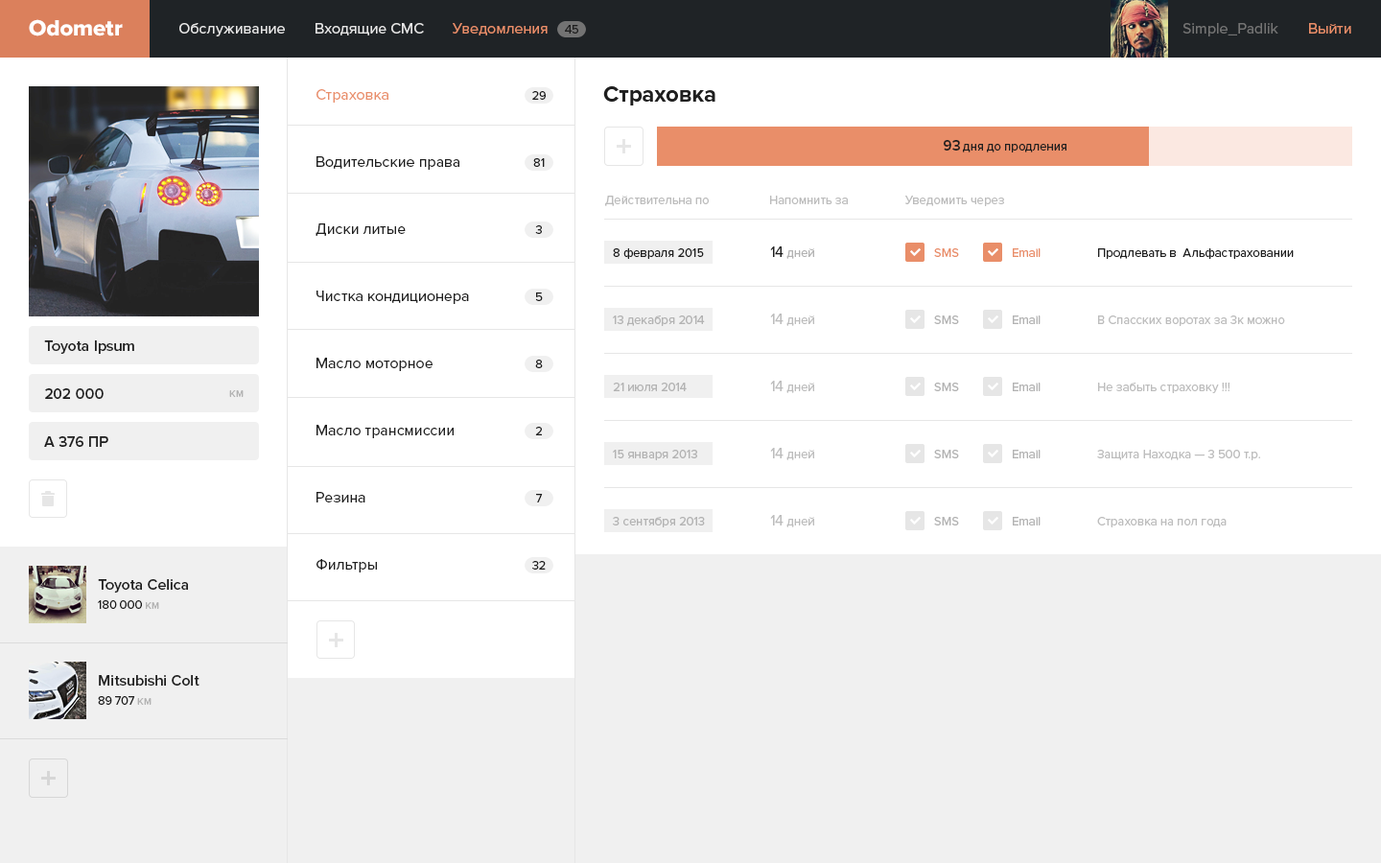
<style>
.page{position:relative;width:1381px;height:863px;background:#ffffff}
.page>*{position:absolute;margin:0}
.t1{font:23px "ProximaNova-Extrabld";color:#ffffff}
.t2{font:15.3px "ProximaNova-Regular";color:#e6e6e6}
.t3{font:15.3px "ProximaNova-Regular";color:#e98e69}
.t4{font:12.5px "ProximaNova-Regular";color:#1f1f1f}
.t5{font:15.3px "ProximaNova-Regular";color:#737373}
.t6{font:15.3px/67.1px "ProximaNova-Regular";color:#1f1f1f}
.t7{font:15.3px/67.1px "ProximaNova-Regular";color:#e98e69}
.t8{font:23px "ProximaNova-Bold";color:#1f1f1f}
.t9{font:12.5px/67.1px "ProximaNova-Regular";color:#1f1f1f}
.t10{font:15.3px "ProximaNova-Semibold";color:#1f1f1f}
.t11{font:12.5px "ProximaNova-Regular";color:#bdbdbd}
.t12{font:12.5px "ProximaNova-Regular";color:#b3b3b3}
.t13{font:15.3px "ProximaNova-Regular";color:#1f1f1f}
.t14{font:12.5px "ProximaNova-Regular";color:#e98e69}
.t15{font:15.3px "ProximaNova-Regular";color:#bdbdbd}
.t16{font:15.3px/19.2px "ProximaNova-Semibold";color:#1f1f1f}
.t17{font:12.5px/19.2px "ProximaNova-Regular";color:#1f1f1f}
.t18{font:12.5px/19.2px "ProximaNova-Regular";color:#b3b3b3}
</style>
<div class="page">
<p class="t1" style="left:29px;top:19px;width:94px;height:17px">Odometr</p>
<p class="t2" style="left:179px;top:23px;width:106px;height:13px">Обслуживание</p>
<p class="t2" style="left:316px;top:23px;width:108px;height:12px">Входящие СМС</p>
<p class="t3" style="left:453px;top:23px;width:95px;height:12px">Уведомления</p>
<p class="t4" style="left:565px;top:25px;width:13px;height:9px">45</p>
<p class="t5" style="left:1183px;top:23px;width:96px;height:13px">Simple_Padlik</p>
<p class="t3" style="left:1309px;top:23px;width:43px;height:11px">Выйти</p>
<p class="t6" style="left:316px;top:89px;width:153px;height:484px"><span class="t7">Страховка<br></span>Водительские права<br>Диски литые<br>Чистка кондиционера<br>Масло моторное<br>Масло трансмиссии<br>Резина<br>Фильтры</p>
<p class="t8" style="left:603px;top:86px;width:113px;height:20px">Страховка</p>
<p class="t9" style="left:532px;top:91px;width:14px;height:479px;text-align:center">29<br>81<br>3<br>5<br>8<br>2<br>7<br>32</p>
<p class="t4" style="left:944px;top:140px;width:123px;height:13px"><span class="t10">93 </span>дня до продления</p>
<p class="t11" style="left:605px;top:196px;width:104px;height:10px">Действительна по</p>
<p class="t11" style="left:770px;top:196px;width:78px;height:8px">Напомнить за</p>
<p class="t11" style="left:905px;top:196px;width:99px;height:10px">Уведомить через</p>
<p class="t4" style="left:613px;top:248px;width:91px;height:11px">8 февраля 2015</p>
<p class="t12" style="left:770px;top:247px;width:44px;height:12px"><span class="t13">14 </span>дней</p>
<p class="t14" style="left:934px;top:248px;width:25px;height:9px">SMS</p>
<p class="t14" style="left:1013px;top:248px;width:28px;height:9px">Email</p>
<p class="t4" style="left:1098px;top:248px;width:196px;height:11px">Продлевать в  Альфастраховании</p>
<p class="t12" style="left:613px;top:316px;width:92px;height:10px">13 декабря 2014</p>
<p class="t11" style="left:770px;top:314px;width:44px;height:12px"><span class="t15">14 </span>дней</p>
<p class="t12" style="left:934px;top:316px;width:25px;height:8px">SMS</p>
<p class="t12" style="left:1013px;top:316px;width:28px;height:8px">Email</p>
<p class="t11" style="left:1098px;top:316px;width:187px;height:10px">В Спасских воротах за 3к можно</p>
<p class="t10" style="left:44px;top:341px;width:90px;height:13px">Toyota Ipsum</p>
<p class="t10" style="left:45px;top:388px;width:59px;height:11px">202 000</p>
<p class="t12" style="left:613px;top:383px;width:74px;height:8px">21 июля 2014</p>
<p class="t11" style="left:770px;top:381px;width:44px;height:12px"><span class="t15">14 </span>дней</p>
<p class="t12" style="left:934px;top:383px;width:25px;height:8px">SMS</p>
<p class="t12" style="left:1013px;top:383px;width:28px;height:8px">Email</p>
<p class="t11" style="left:1098px;top:383px;width:133px;height:10px">Не забыть страховку !!!</p>
<p class="t12" style="left:229px;top:390px;width:15px;height:7px">км</p>
<p class="t10" style="left:44px;top:436px;width:64px;height:11px">А 376 ПР</p>
<p class="t12" style="left:613px;top:450px;width:84px;height:10px">15 января 2013</p>
<p class="t11" style="left:770px;top:448px;width:44px;height:12px"><span class="t15">14 </span>дней</p>
<p class="t12" style="left:934px;top:450px;width:25px;height:9px">SMS</p>
<p class="t12" style="left:1013px;top:450px;width:28px;height:9px">Email</p>
<p class="t11" style="left:1097px;top:450px;width:163px;height:10px">Защита Находка — 3 500 т.р.</p>
<p class="t12" style="left:613px;top:517px;width:92px;height:11px">3 сентября 2013</p>
<p class="t11" style="left:770px;top:515px;width:44px;height:13px"><span class="t15">14 </span>дней</p>
<p class="t12" style="left:934px;top:517px;width:25px;height:9px">SMS</p>
<p class="t12" style="left:1013px;top:517px;width:28px;height:9px">Email</p>
<p class="t11" style="left:1097px;top:517px;width:130px;height:11px">Страховка на пол года</p>
<p class="t16" style="left:98px;top:579px;width:90px;height:30px">Toyota Celica<br><span class="t17">180 000 </span><span class="t18">км</span></p>
<p class="t16" style="left:98px;top:675px;width:102px;height:30px">Mitsubishi Colt<br><span class="t17">89 707 </span><span class="t18">км</span></p>
</div>
